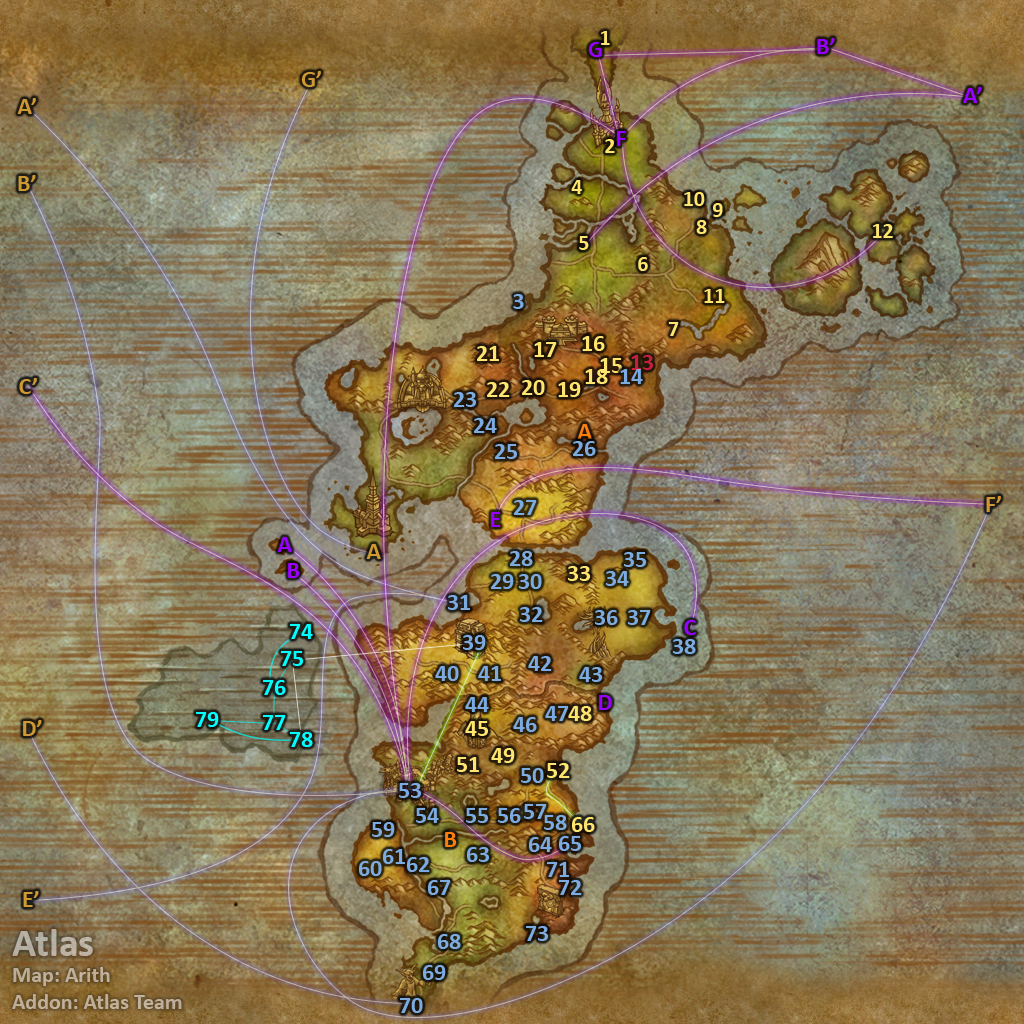
<style>
.page{position:relative;width:1024px;height:1024px}
.page>*{position:absolute;margin:0}
.t1{font:22px "Calibri-Bold";letter-spacing:-0.005em;color:#fee570}
.t2{font:24px "Calibri-Bold";color:#9900ff}
.t3{font:24px "Calibri-Bold";color:#cc9933}
.t4{font:24px "Calibri-Bold";color:#7babe0}
.t5{font:24px "Calibri-Bold";color:#fee570}
.t6{font:24px "Calibri-Bold";color:#c41f3b}
.t7{font:24px "Calibri-Bold";color:#ff7d0a}
.t8{font:24px "Calibri-Bold";color:#00ffff}
.t9{font:22px "Calibri-Bold";color:#bdaf9d}
.t10{font:40px "Calibri-Bold";color:#bdaf9d}
</style>
<div class="page">
<p class="t1" style="left:601px;top:31px;width:9px;height:14px">1</p>
<p class="t2" style="left:817px;top:38px;width:18px;height:16px">B’</p>
<p class="t2" style="left:588px;top:42px;width:14px;height:15px">G</p>
<p class="t3" style="left:301px;top:71px;width:20px;height:16px">G’</p>
<p class="t2" style="left:963px;top:87px;width:19px;height:16px">A’</p>
<p class="t3" style="left:17px;top:98px;width:19px;height:16px">A’</p>
<p class="t2" style="left:617px;top:131px;width:9px;height:15px">F</p>
<p class="t1" style="left:605px;top:139px;width:10px;height:14px">2</p>
<p class="t3" style="left:18px;top:175px;width:18px;height:16px">B’</p>
<p class="t1" style="left:571px;top:180px;width:11px;height:14px">4</p>
<p class="t1" style="left:684px;top:192px;width:21px;height:14px">10</p>
<p class="t1" style="left:713px;top:203px;width:10px;height:14px">9</p>
<p class="t1" style="left:696px;top:220px;width:11px;height:14px">8</p>
<p class="t1" style="left:873px;top:224px;width:20px;height:14px">12</p>
<p class="t1" style="left:579px;top:236px;width:10px;height:14px">5</p>
<p class="t1" style="left:638px;top:257px;width:10px;height:14px">6</p>
<p class="t4" style="left:513px;top:294px;width:11px;height:15px">3</p>
<p class="t1" style="left:704px;top:289px;width:21px;height:14px">11</p>
<p class="t1" style="left:668px;top:322px;width:11px;height:14px">7</p>
<p class="t5" style="left:534px;top:342px;width:23px;height:15px">17</p>
<p class="t5" style="left:582px;top:336px;width:23px;height:15px">16</p>
<p class="t5" style="left:477px;top:346px;width:22px;height:15px">21</p>
<p class="t5" style="left:600px;top:358px;width:22px;height:15px">15</p>
<p class="t6" style="left:631px;top:355px;width:22px;height:15px">13</p>
<p class="t5" style="left:585px;top:369px;width:23px;height:15px">18</p>
<p class="t4" style="left:620px;top:369px;width:23px;height:15px">14</p>
<p class="t3" style="left:19px;top:378px;width:18px;height:16px">C’</p>
<p class="t5" style="left:487px;top:382px;width:23px;height:15px">22</p>
<p class="t5" style="left:522px;top:380px;width:23px;height:15px">20</p>
<p class="t5" style="left:558px;top:382px;width:23px;height:15px">19</p>
<p class="t4" style="left:454px;top:392px;width:22px;height:15px">23</p>
<p class="t4" style="left:474px;top:418px;width:23px;height:15px">24</p>
<p class="t7" style="left:577px;top:424px;width:15px;height:15px">A</p>
<p class="t4" style="left:495px;top:444px;width:22px;height:15px">25</p>
<p class="t4" style="left:573px;top:441px;width:23px;height:15px">26</p>
<p class="t3" style="left:986px;top:496px;width:15px;height:16px">F’</p>
<p class="t4" style="left:514px;top:500px;width:23px;height:15px">27</p>
<p class="t2" style="left:491px;top:512px;width:10px;height:15px">E</p>
<p class="t2" style="left:277px;top:537px;width:15px;height:15px">A</p>
<p class="t3" style="left:366px;top:544px;width:15px;height:15px">A</p>
<p class="t4" style="left:510px;top:551px;width:23px;height:15px">28</p>
<p class="t4" style="left:624px;top:552px;width:22px;height:15px">35</p>
<p class="t2" style="left:288px;top:563px;width:12px;height:15px">B</p>
<p class="t5" style="left:568px;top:566px;width:22px;height:15px">33</p>
<p class="t4" style="left:491px;top:574px;width:23px;height:15px">29</p>
<p class="t4" style="left:519px;top:574px;width:23px;height:15px">30</p>
<p class="t4" style="left:606px;top:571px;width:23px;height:15px">34</p>
<p class="t4" style="left:448px;top:595px;width:22px;height:15px">31</p>
<p class="t4" style="left:520px;top:607px;width:23px;height:15px">32</p>
<p class="t4" style="left:595px;top:610px;width:23px;height:15px">36</p>
<p class="t4" style="left:628px;top:610px;width:23px;height:15px">37</p>
<p class="t8" style="left:290px;top:624px;width:23px;height:15px">74</p>
<p class="t2" style="left:684px;top:620px;width:12px;height:15px">C</p>
<p class="t4" style="left:463px;top:635px;width:23px;height:15px">39</p>
<p class="t4" style="left:673px;top:639px;width:23px;height:15px">38</p>
<p class="t8" style="left:281px;top:651px;width:22px;height:15px">75</p>
<p class="t4" style="left:528px;top:656px;width:24px;height:15px">42</p>
<p class="t4" style="left:435px;top:666px;width:24px;height:15px">40</p>
<p class="t4" style="left:478px;top:666px;width:23px;height:15px">41</p>
<p class="t4" style="left:579px;top:667px;width:23px;height:15px">43</p>
<p class="t8" style="left:263px;top:680px;width:23px;height:15px">76</p>
<p class="t4" style="left:465px;top:697px;width:24px;height:15px">44</p>
<p class="t2" style="left:599px;top:695px;width:13px;height:15px">D</p>
<p class="t8" style="left:196px;top:712px;width:23px;height:15px">79</p>
<p class="t4" style="left:545px;top:706px;width:24px;height:15px">47</p>
<p class="t5" style="left:568px;top:706px;width:24px;height:15px">48</p>
<p class="t3" style="left:23px;top:720px;width:19px;height:16px">D’</p>
<p class="t8" style="left:263px;top:715px;width:23px;height:15px">77</p>
<p class="t5" style="left:465px;top:721px;width:23px;height:15px">45</p>
<p class="t4" style="left:513px;top:717px;width:24px;height:15px">46</p>
<p class="t8" style="left:290px;top:732px;width:23px;height:15px">78</p>
<p class="t5" style="left:491px;top:748px;width:24px;height:15px">49</p>
<p class="t5" style="left:457px;top:757px;width:22px;height:15px">51</p>
<p class="t4" style="left:521px;top:768px;width:23px;height:15px">50</p>
<p class="t5" style="left:547px;top:763px;width:23px;height:15px">52</p>
<p class="t4" style="left:399px;top:783px;width:22px;height:15px">53</p>
<p class="t4" style="left:416px;top:808px;width:23px;height:15px">54</p>
<p class="t4" style="left:466px;top:808px;width:22px;height:15px">55</p>
<p class="t4" style="left:498px;top:808px;width:23px;height:15px">56</p>
<p class="t4" style="left:524px;top:804px;width:23px;height:15px">57</p>
<p class="t4" style="left:372px;top:822px;width:23px;height:15px">59</p>
<p class="t4" style="left:544px;top:815px;width:23px;height:15px">58</p>
<p class="t5" style="left:572px;top:817px;width:23px;height:15px">66</p>
<p class="t7" style="left:445px;top:832px;width:12px;height:15px">B</p>
<p class="t4" style="left:529px;top:837px;width:23px;height:15px">64</p>
<p class="t4" style="left:559px;top:836px;width:22px;height:15px">65</p>
<p class="t4" style="left:383px;top:849px;width:22px;height:15px">61</p>
<p class="t4" style="left:407px;top:857px;width:23px;height:15px">62</p>
<p class="t4" style="left:467px;top:847px;width:22px;height:15px">63</p>
<p class="t4" style="left:359px;top:861px;width:23px;height:15px">60</p>
<p class="t4" style="left:547px;top:862px;width:22px;height:15px">71</p>
<p class="t4" style="left:428px;top:880px;width:23px;height:15px">67</p>
<p class="t4" style="left:559px;top:880px;width:23px;height:15px">72</p>
<p class="t3" style="left:23px;top:891px;width:16px;height:16px">E’</p>
<p class="t9" style="left:12px;top:929px;width:170px;height:80px"><span class="t10">Atlas<br></span>Map: Arith<br>Addon: Atlas Team</p>
<p class="t4" style="left:526px;top:926px;width:22px;height:15px">73</p>
<p class="t4" style="left:438px;top:934px;width:23px;height:15px">68</p>
<p class="t4" style="left:423px;top:965px;width:23px;height:15px">69</p>
<p class="t4" style="left:400px;top:998px;width:23px;height:15px">70</p>
</div>
